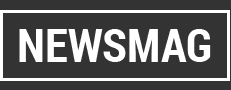
<style>
.page{position:relative;width:231px;height:90px;background:#333333}
.page>*{position:absolute;margin:0}
.t1{font:46px "RobotoCondensed-Bold";color:#ffffff}
</style>
<div class="page">
<p class="t1" style="left:19px;top:29px;width:192px;height:33px">NEWSMAG</p>
</div>
